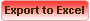
<style>
.page{position:relative;width:90px;height:21px}
.page>*{position:absolute;margin:0}
.t1{font:11px "Arial-BoldMT";color:#382909}
</style>
<div class="page">
<p class="t1" style="left:5px;top:6px;width:79px;height:10px">Export to Excel</p>
</div>
